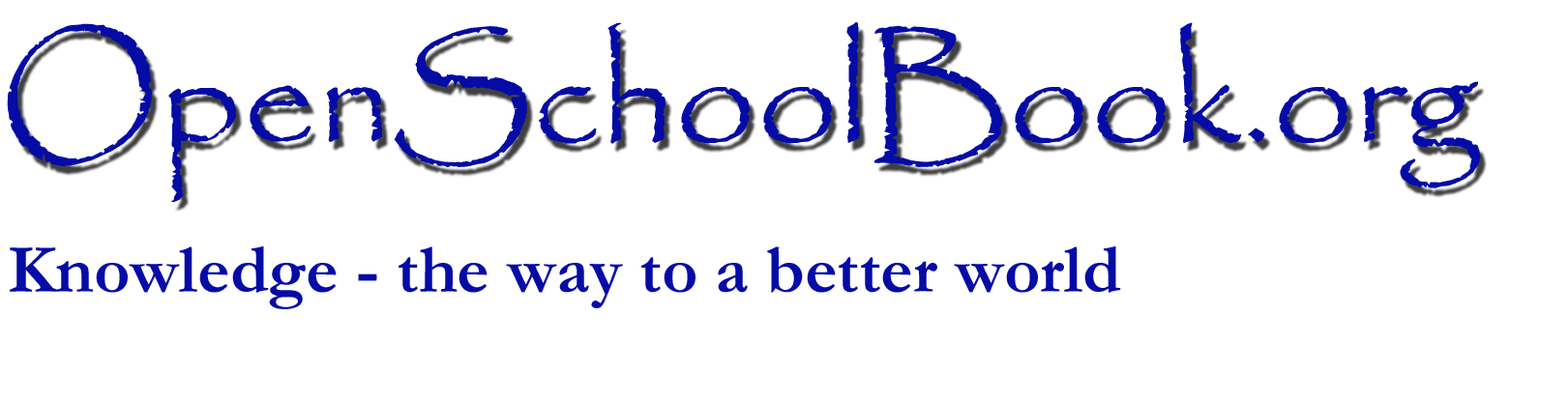
<style>
.page{position:relative;width:1568px;height:401px;background:#ffffff}
.page>*{position:absolute;margin:0}
.t1{font:145.1px "Papyrus-Regular";color:#050ba5}
.t2{font:69.6px "Garamond-Bold";color:#050ba5}
</style>
<div class="page">
<p class="t1" style="left:7px;top:22px;width:1474px;height:180px">OpenSchoolBook.org</p>
<p class="t2" style="left:10px;top:247px;width:1111px;height:63px">Knowledge - the way to a better world</p>
</div>
